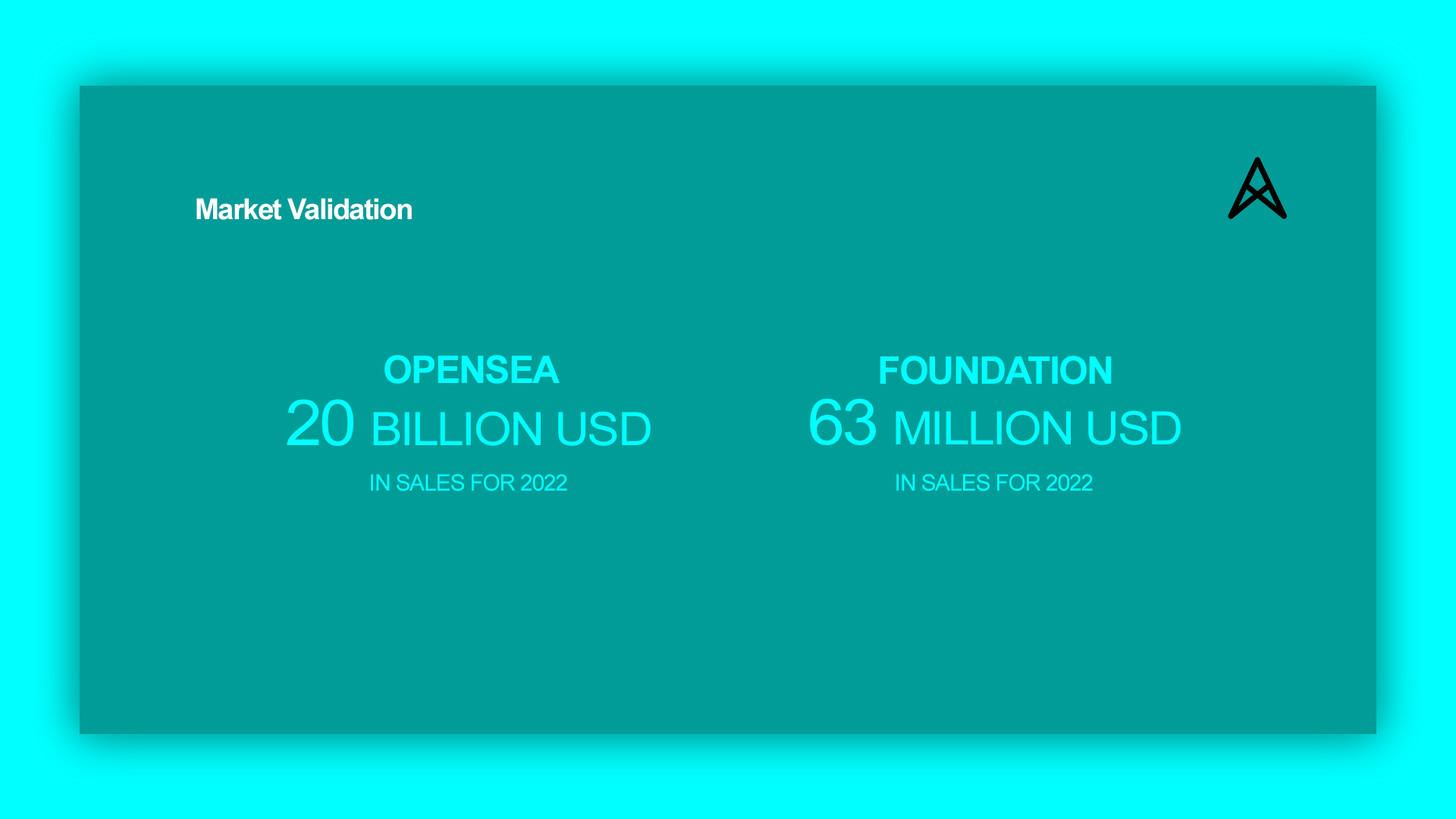
<style>
.page{position:relative;width:1456px;height:819px;background:#009c98}
.page>*{position:absolute;margin:0}
.t1{font:28.8px "Arial-BoldMT";letter-spacing:-0.04em;color:#feffff}
.t2{font:38.1px "Arial-BoldMT";letter-spacing:-0.04em;color:#00ffff}
.t3{font:46.2px "ArialMT";letter-spacing:-0.04em;color:#00ffff;scale:1.05 1}
.t4{font:63.5px "ArialMT";letter-spacing:-0.04em;color:#00ffff;scale:1.05 1}
.t5{font:22.7px "ArialMT";letter-spacing:-0.04em;color:#00ffff}
</style>
<div class="page">
<p class="t1" style="left:196px;top:198px;width:216px;height:22px">Market Validation</p>
<p class="t2" style="left:384px;top:355px;width:176px;height:29px">OPENSEA</p>
<p class="t2" style="left:880px;top:356px;width:232px;height:28px">FOUNDATION</p>
<p class="t3" style="left:287px;top:399px;width:364px;height:47px"><span class="t4">20 </span>BILLION USD</p>
<p class="t3" style="left:810px;top:398px;width:371px;height:47px"><span class="t4">63 </span>MILLION USD</p>
<p class="t5" style="left:371px;top:474px;width:196px;height:17px">IN SALES FOR 2022</p>
<p class="t5" style="left:896px;top:474px;width:197px;height:17px">IN SALES FOR 2022</p>
</div>
